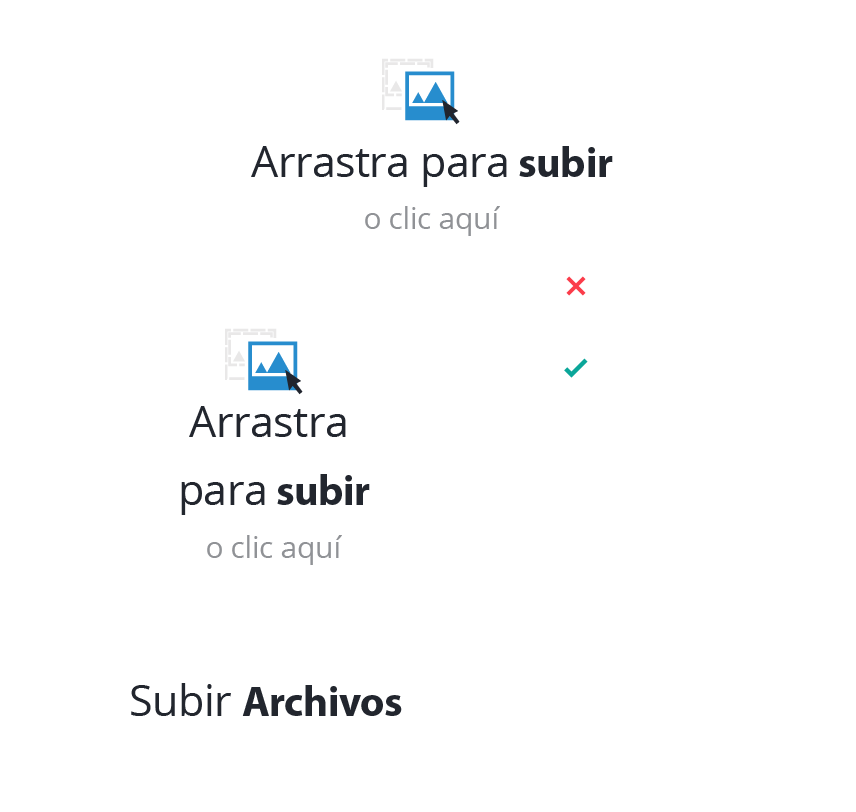
<style>
.page{position:relative;width:856px;height:812px;background:#ffffff}
.page>*{position:absolute;margin:0}
.t1{font:42.6px "OpenSans";letter-spacing:-0.01em;color:#22262e}
.t2{font:42.6px "MyriadPro-Bold";letter-spacing:-0.01em;color:#22262e}
.t3{font:30px "OpenSans";letter-spacing:-0.01em;color:#909296}
.t4{font:42.6px/68.2px "OpenSans";letter-spacing:-0.01em;color:#22262e}
.t5{font:42.6px/68.2px "MyriadPro-Bold";letter-spacing:-0.01em;color:#22262e}
</style>
<div class="page">
<p class="t1" style="left:251px;top:146px;width:362px;height:41px">Arrastra para <span class="t2">subir</span></p>
<p class="t3" style="left:365px;top:206px;width:135px;height:30px">o clic aquí</p>
<p class="t4" style="left:181px;top:406px;width:189px;height:109px;text-align:center">Arrastra <br>para <span class="t5">subir</span></p>
<p class="t3" style="left:207px;top:535px;width:135px;height:30px">o clic aquí</p>
<p class="t2" style="left:131px;top:683px;width:271px;height:33px"><span class="t1">Subir </span>Archivos</p>
</div>
